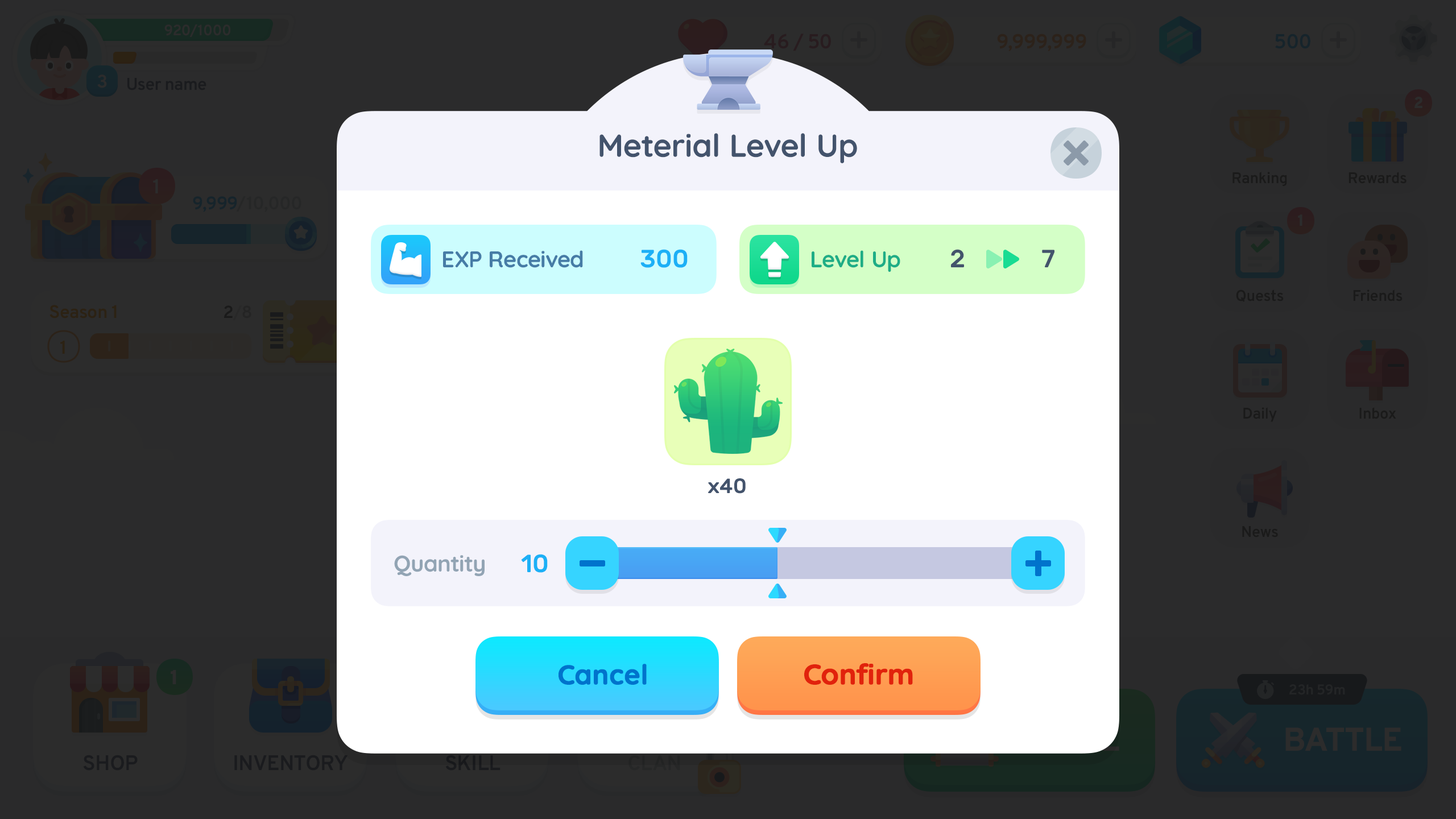
<style>
.page{position:relative;width:1456px;height:819px;background:#2b2b2c}
.page>*{position:absolute;margin:0}
.t1{font:31.8px "Quicksand-Bold";color:#43536c}
.t2{font:22.7px "Quicksand-Bold";letter-spacing:-0.01em;color:#467ca6}
.t3{font:25px "Rubik-Medium";color:#1cb0f6}
.t4{font:22.7px "Quicksand-Bold";letter-spacing:-0.01em;color:#1ead86}
.t5{font:25px "Rubik-Medium";color:#43536c}
.t6{font:20.7px "Rubik-Medium";letter-spacing:-0.01em;color:#43536c}
.t7{font:22.7px "Quicksand-Bold";letter-spacing:-0.01em;color:#92a4b4}
.t8{font:27.3px "Quicksand-Bold";color:#0073cc;font-weight:bold}
.t9{font:28.4px "Quicksand-Bold";letter-spacing:-0.01em;color:#e1220c;font-weight:bold}
</style>
<div class="page">
<p class="t1" style="left:599px;top:133px;width:258px;height:30px">Meterial Level Up</p>
<p class="t2" style="left:443px;top:250px;width:140px;height:18px">EXP Received</p>
<p class="t3" style="left:640px;top:249px;width:48px;height:19px">300</p>
<p class="t4" style="left:812px;top:250px;width:88px;height:22px">Level Up</p>
<p class="t5" style="left:951px;top:249px;width:13px;height:18px">2</p>
<p class="t5" style="left:1042px;top:250px;width:12px;height:17px">7</p>
<p class="t6" style="left:708px;top:478px;width:38px;height:16px">x40</p>
<p class="t7" style="left:394px;top:555px;width:91px;height:21px">Quantity</p>
<p class="t3" style="left:521px;top:554px;width:27px;height:19px">10</p>
<p class="t8" style="left:559px;top:664px;width:88px;height:21px">Cancel</p>
<p class="t9" style="left:804px;top:663px;width:109px;height:22px">Confirm</p>
</div>
